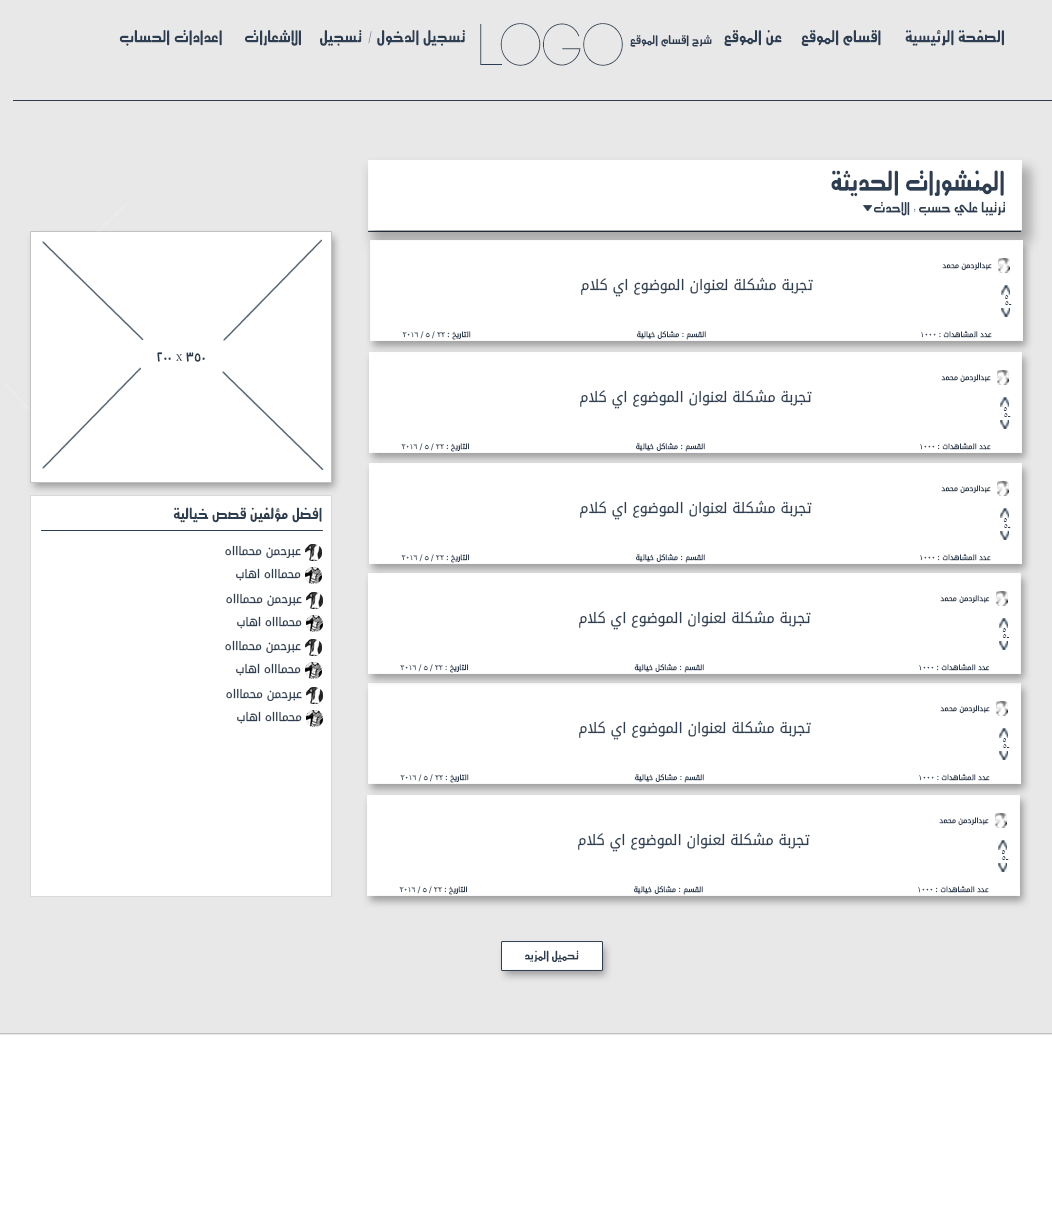
<style>
.page{position:relative;width:1052px;height:1206px;background:#ffffff}
.page>*{position:absolute;margin:0}
.t1{font:15.8px "Motken-Unicode-Anbobi";color:#2d3e52;scale:0.94 1}
.t2{font:58.8px "Code-Light";color:#2d3e52;scale:0.94 1}
.t3{font:11.6px "Motken-Unicode-Anbobi";color:#2d3e52;scale:0.94 1}
.t4{font:26.2px "Motken-Unicode-Anbobi";color:#2d3e52;scale:0.88 1}
.t5{font:13.7px "Motken-Unicode-Anbobi";color:#2d3e52;scale:0.88 1}
.t6{font:7.2px "DroidArabicKufi";color:#2d3e52}
.t7{font:14.4px "DroidArabicKufi";color:#2d3e52}
.t8{font:7.7px "TimesNewRomanPSMT";color:#2d3e52}
.t9{font:7.2px "Tahoma";color:#2d3e52}
.t10{font:14.7px "Motken-Unicode-Anbobi";color:#2d3e50;scale:0.94 1}
.t11{font:11.7px "DroidArabicKufi";color:#2d3e52}
.t12{font:11.6px "Motken-Unicode-Anbobi";color:#2d3e50;scale:0.94 1}
</style>
<div class="page">
<p class="t1" style="left:119px;top:30px;width:103px;height:16px">اعدادات الحساب</p>
<p class="t1" style="left:245px;top:30px;width:56px;height:16px">الاشعارات</p>
<p class="t1" style="left:320px;top:30px;width:145px;height:16px">تسجيل الدخول / تسجيل</p>
<p class="t2" style="left:480px;top:23px;width:143px;height:43px">Logo</p>
<p class="t1" style="left:724px;top:30px;width:58px;height:16px">عن الموقع</p>
<p class="t1" style="left:801px;top:30px;width:80px;height:16px">اقسام الموقع</p>
<p class="t1" style="left:905px;top:30px;width:99px;height:16px">الصفحة الرئيسية</p>
<p class="t3" style="left:630px;top:35px;width:82px;height:12px">شرح اقسام الموقع</p>
<p class="t4" style="left:831px;top:170px;width:173px;height:27px">المنشورات الحديثة</p>
<p class="t5" style="left:874px;top:201px;width:131px;height:15px">ترتيبا علي حسب : الاحدث</p>
<p class="t6" style="left:942px;top:262px;width:50px;height:8px">عبدالرحمن محمد</p>
<p class="t7" style="left:581px;top:277px;width:232px;height:20px">تجربة مشكلة لعنوان الموضوع اي كلام</p>
<p class="t8" style="left:1005px;top:295px;width:4px;height:4px">5</p>
<p class="t8" style="left:1005px;top:301px;width:7px;height:4px">-5</p>
<p class="t9" style="left:402px;top:331px;width:69px;height:9px"><span class="t6">التاريخ </span>: 22 / 5 / 2016</p>
<p class="t6" style="left:637px;top:330px;width:69px;height:10px">القسم <span class="t9">:</span> مشاكل خيالية</p>
<p class="t6" style="left:921px;top:330px;width:71px;height:8px">عدد المشاهدات <span class="t9">: 1000</span></p>
<p class="t10" style="left:157px;top:352px;width:48px;height:10px">350 x 200</p>
<p class="t6" style="left:941px;top:374px;width:50px;height:8px">عبدالرحمن محمد</p>
<p class="t7" style="left:580px;top:389px;width:232px;height:20px">تجربة مشكلة لعنوان الموضوع اي كلام</p>
<p class="t8" style="left:1003px;top:407px;width:4px;height:4px">5</p>
<p class="t8" style="left:1004px;top:413px;width:7px;height:4px">-5</p>
<p class="t9" style="left:401px;top:443px;width:68px;height:9px"><span class="t6">التاريخ </span>: 22 / 5 / 2016</p>
<p class="t6" style="left:636px;top:442px;width:69px;height:10px">القسم <span class="t9">:</span> مشاكل خيالية</p>
<p class="t6" style="left:920px;top:442px;width:71px;height:8px">عدد المشاهدات <span class="t9">: 1000</span></p>
<p class="t6" style="left:941px;top:485px;width:50px;height:8px">عبدالرحمن محمد</p>
<p class="t10" style="left:173px;top:507px;width:149px;height:16px">افضل مؤلفين قصص خيالية</p>
<p class="t7" style="left:580px;top:500px;width:232px;height:20px">تجربة مشكلة لعنوان الموضوع اي كلام</p>
<p class="t8" style="left:1003px;top:518px;width:4px;height:4px">5</p>
<p class="t8" style="left:1004px;top:524px;width:7px;height:4px">-5</p>
<p class="t11" style="left:225px;top:545px;width:76px;height:13px">عبرحمن محماااه</p>
<p class="t9" style="left:401px;top:554px;width:68px;height:9px"><span class="t6">التاريخ </span>: 22 / 5 / 2016</p>
<p class="t6" style="left:636px;top:553px;width:69px;height:10px">القسم <span class="t9">:</span> مشاكل خيالية</p>
<p class="t6" style="left:920px;top:553px;width:71px;height:8px">عدد المشاهدات <span class="t9">: 1000</span></p>
<p class="t11" style="left:236px;top:568px;width:65px;height:13px">محماااه اهاب</p>
<p class="t11" style="left:226px;top:593px;width:76px;height:13px">عبرحمن محماااه</p>
<p class="t6" style="left:940px;top:595px;width:50px;height:8px">عبدالرحمن محمد</p>
<p class="t11" style="left:237px;top:616px;width:65px;height:13px">محماااه اهاب</p>
<p class="t7" style="left:579px;top:610px;width:232px;height:20px">تجربة مشكلة لعنوان الموضوع اي كلام</p>
<p class="t8" style="left:1002px;top:628px;width:4px;height:4px">5</p>
<p class="t11" style="left:225px;top:640px;width:76px;height:13px">عبرحمن محماااه</p>
<p class="t8" style="left:1003px;top:634px;width:6px;height:4px">-5</p>
<p class="t11" style="left:236px;top:663px;width:65px;height:13px">محماااه اهاب</p>
<p class="t9" style="left:400px;top:664px;width:68px;height:9px"><span class="t6">التاريخ </span>: 22 / 5 / 2016</p>
<p class="t6" style="left:634px;top:663px;width:70px;height:10px">القسم <span class="t9">:</span> مشاكل خيالية</p>
<p class="t6" style="left:919px;top:663px;width:71px;height:8px">عدد المشاهدات <span class="t9">: 1000</span></p>
<p class="t11" style="left:226px;top:688px;width:76px;height:13px">عبرحمن محماااه</p>
<p class="t11" style="left:237px;top:711px;width:65px;height:13px">محماااه اهاب</p>
<p class="t6" style="left:940px;top:705px;width:50px;height:8px">عبدالرحمن محمد</p>
<p class="t7" style="left:579px;top:720px;width:232px;height:20px">تجربة مشكلة لعنوان الموضوع اي كلام</p>
<p class="t8" style="left:1003px;top:738px;width:4px;height:4px">5</p>
<p class="t8" style="left:1003px;top:744px;width:7px;height:4px">-5</p>
<p class="t9" style="left:400px;top:774px;width:69px;height:9px"><span class="t6">التاريخ </span>: 22 / 5 / 2016</p>
<p class="t6" style="left:635px;top:773px;width:69px;height:10px">القسم <span class="t9">:</span> مشاكل خيالية</p>
<p class="t6" style="left:919px;top:773px;width:71px;height:8px">عدد المشاهدات <span class="t9">: 1000</span></p>
<p class="t6" style="left:939px;top:817px;width:50px;height:8px">عبدالرحمن محمد</p>
<p class="t7" style="left:578px;top:832px;width:232px;height:20px">تجربة مشكلة لعنوان الموضوع اي كلام</p>
<p class="t8" style="left:1001px;top:850px;width:4px;height:4px">5</p>
<p class="t8" style="left:1002px;top:856px;width:7px;height:4px">-5</p>
<p class="t9" style="left:399px;top:886px;width:68px;height:9px"><span class="t6">التاريخ </span>: 22 / 5 / 2016</p>
<p class="t6" style="left:634px;top:885px;width:69px;height:10px">القسم <span class="t9">:</span> مشاكل خيالية</p>
<p class="t6" style="left:918px;top:885px;width:71px;height:8px">عدد المشاهدات <span class="t9">: 1000</span></p>
<p class="t12" style="left:525px;top:950px;width:54px;height:12px">تحميل المزيد</p>
</div>
